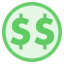
<style>
.page{position:relative;width:64px;height:64px;background:#e5f6e5}
.page>*{position:absolute;margin:0}
.t1{font:36px "Futura-Bold";color:#5fcb62}
</style>
<div class="page">
<p class="t1" style="left:10px;top:13px;width:45px;height:37px">$$</p>
</div>
